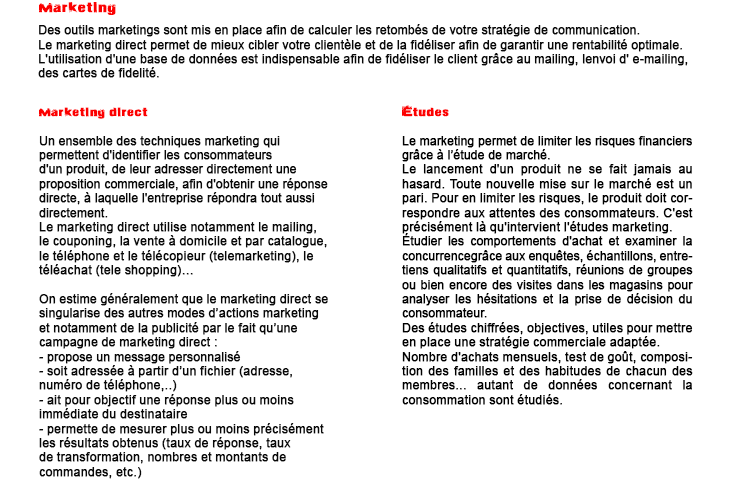
<style>
.page{position:relative;width:750px;height:500px;background:#ffffff}
.page>*{position:absolute;margin:0}
.t1{font:14px "ActionoftheTimeNew";color:#fc0000;font-weight:bold}
.t2{font:12px "ArialMT";color:#080808;font-weight:bold}
.t3{font:12px "ActionoftheTimeNew";color:#fc0000;font-weight:bold}
.t4{font:12px "ArialMT";color:#000000;font-weight:bold}
.t5{font:12px "ActionoftheTimeNew";color:#fc0000;text-transform:uppercase;font-weight:bold}
.t6{font:12px "ArialMT";color:#000000;text-transform:uppercase;font-weight:bold}
</style>
<div class="page">
<p class="t1" style="left:39px;top:2px;width:77px;height:13px">Marketing</p>
<p class="t2" style="left:38px;top:24px;width:650px;height:54px">Des outils marketings sont mis en place afin de calculer les retombés de votre stratégie de communication. <br>Le marketing direct permet de mieux cibler votre clientèle et de la fidéliser afin de garantir une rentabilité optimale.<br>L'utilisation d'une base de données est indispensable afin de fidéliser le client grâce au mailing, lenvoi d' e-mailing, des cartes de fidelité.</p>
<p class="t2" style="left:39px;top:107px;width:289px;height:372px;text-align:justify"><span class="t3">Marketing direct<br></span><br>Un ensemble des techniques marketing qui permettent d'identifier les consommateurs d'un produit, de leur adresser directement une proposition commerciale, afin d'obtenir une réponse directe, à laquelle l'entreprise répondra tout aussi directement. <br>Le marketing direct utilise notamment le mailing, le couponing, la vente à domicile et par catalogue, le téléphone et le télécopieur (telemarketing), le téléachat (tele shopping)…<br><br>On estime généralement que le marketing direct se singularise des autres modes d’actions marketing et notamment de la publicité par le fait qu’une campagne de marketing direct :<br>- propose un message personnalisé <br>- soit adressée à partir d’un fichier (adresse, numéro de téléphone,..) <br>- ait pour objectif une réponse plus ou moins immédiate du destinataire <br>- permette de mesurer plus ou moins précisément les résultats obtenus (taux de réponse, taux de transformation, nombres et montants de commandes, etc.)</p>
<p class="t4" style="left:402px;top:105px;width:291px;height:300px;text-align:justify"><span class="t5">é</span><span class="t3">tudes<br></span><br>Le marketing permet de limiter les risques financiers grâce à l’étude de marché.<br>Le lancement d'un produit ne se fait jamais au hasard. Toute nouvelle mise sur le marché est un pari. Pour en limiter les risques, le produit doit correspondre aux attentes des consommateurs. C'est précisément là qu'intervient l'études marketing.<br><span class="t6">é</span>tudier les comportements d'achat et examiner la concurrencegrâce aux enquêtes, échantillons, entretiens qualitatifs et quantitatifs, réunions de groupes ou bien encore des visites dans les magasins pour analyser les hésitations et la prise de décision du consommateur. <br>Des études chiffrées, objectives, utiles pour mettre en place une stratégie commerciale adaptée.<br>Nombre d'achats mensuels, test de goût, composition des familles et des habitudes de chacun des membres... autant de données concernant la consommation sont étudiés.</p>
</div>
